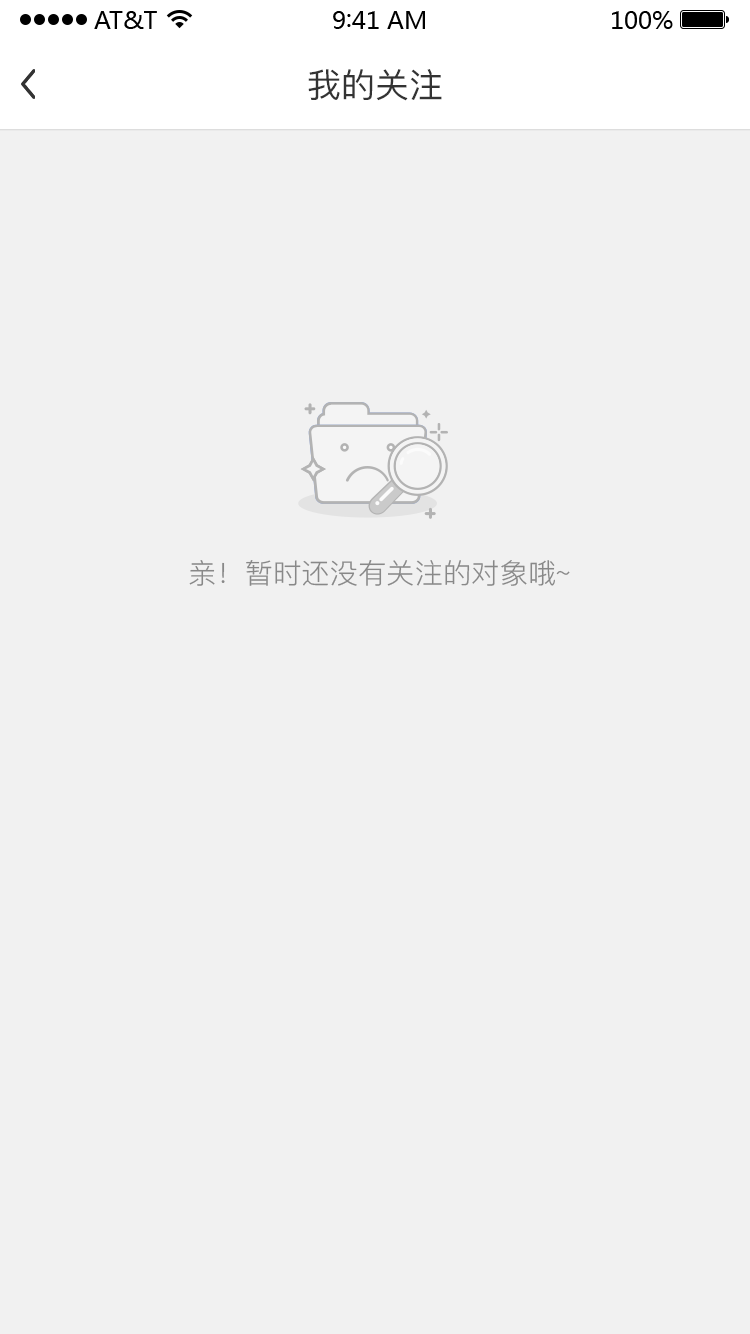
<style>
.page{position:relative;width:750px;height:1334px;background:#f1f1f1}
.page>*{position:absolute;margin:0}
.t1{font:34px "PingFang-SC-Medium";color:#333333}
.t2{font:28px "PingFang-SC-Regular";color:#888888}
</style>
<div class="page">
<p class="t1" style="left:308px;top:69px;width:134px;height:32px">我的关注</p>
<p class="t2" style="left:189px;top:560px;width:381px;height:26px">亲！暂时还没有关注的对象哦~</p>
</div>
